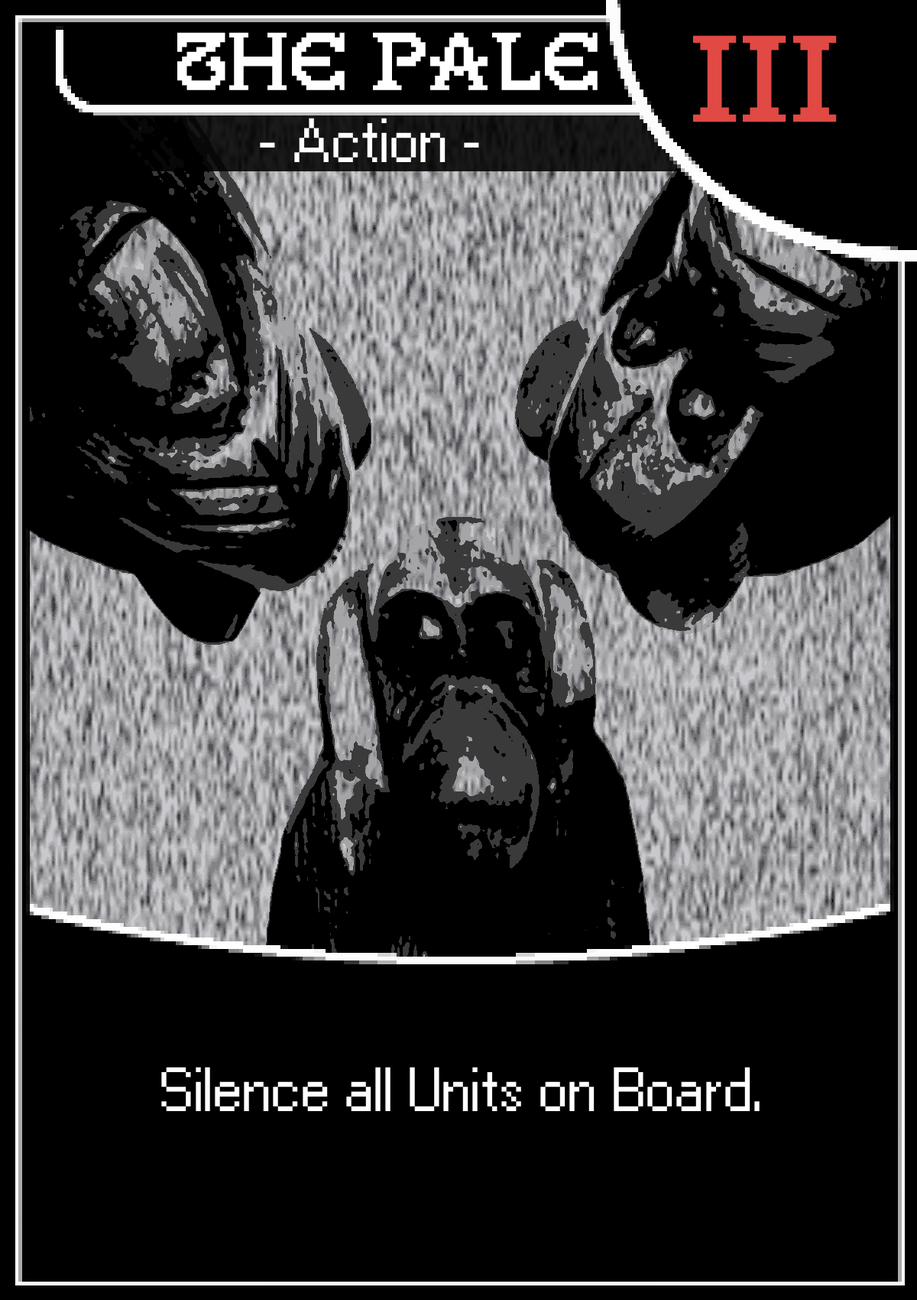
<style>
.page{position:relative;width:917px;height:1300px;background:#000000}
.page>*{position:absolute;margin:0}
.t1{font:76.5px "GallaeciaForte";color:#ffffff}
.t2{font:114.7px "GallaeciaForte";color:#e04944}
.t3{font:53.5px "Ari-W9500-Regular";color:#ffffff}
</style>
<div class="page">
<p class="t1" style="left:177px;top:32px;width:421px;height:58px">The Pale</p>
<p class="t2" style="left:693px;top:35px;width:144px;height:87px">III</p>
<p class="t3" style="left:260px;top:118px;width:219px;height:44px">- Action -</p>
<p class="t3" style="left:161px;top:1067px;width:599px;height:44px">Silence all Units on Board.</p>
</div>
